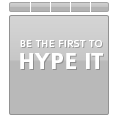
<style>
.page{position:relative;width:117px;height:117px;background:#b9b9b9}
.page>*{position:absolute;margin:0}
.t1{font:10.7px "Colaborate-Regular";letter-spacing:0.025em;color:#ffffff;text-transform:uppercase}
.t2{font:24px "Colaborate-Bold";letter-spacing:-0.025em;color:#ffffff;text-transform:uppercase}
</style>
<div class="page">
<p class="t1" style="left:20px;top:40px;width:82px;height:7px">be the first to</p>
<p class="t2" style="left:20px;top:53px;width:83px;height:16px">hype it</p>
</div>
